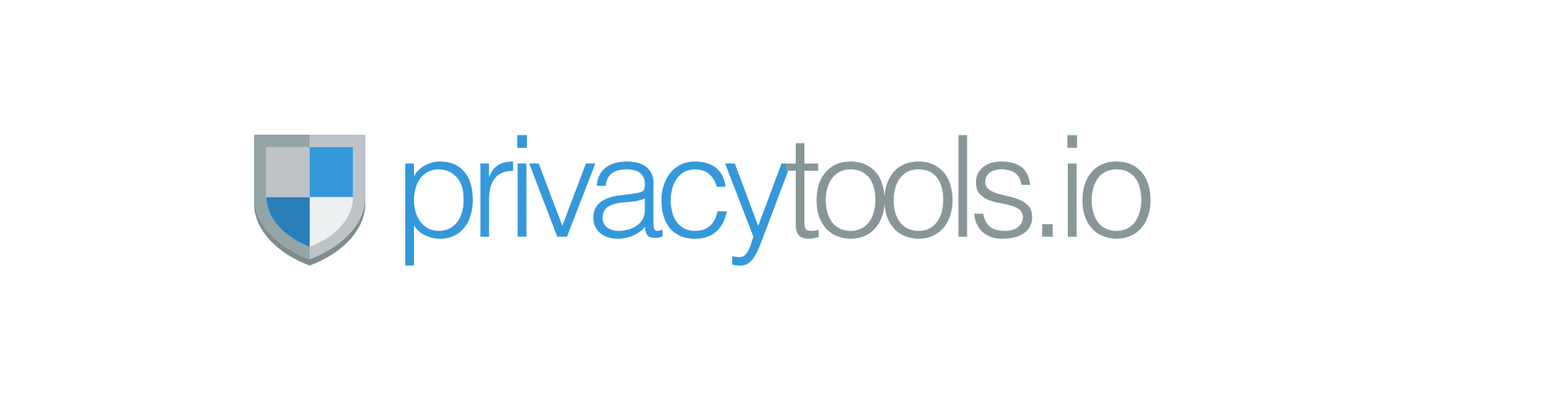
<style>
.page{position:relative;width:1568px;height:401px;background:#ffffff}
.page>*{position:absolute;margin:0}
.t1{font:141.1px "Helvetica-Light";letter-spacing:-0.075em;color:#889697}
.t2{font:141.1px "Helvetica-Light";letter-spacing:-0.075em;color:#3498db}
</style>
<div class="page">
<p class="t1" style="left:405px;top:135px;width:746px;height:131px"><span class="t2">privacy</span>tools.io</p>
</div>
